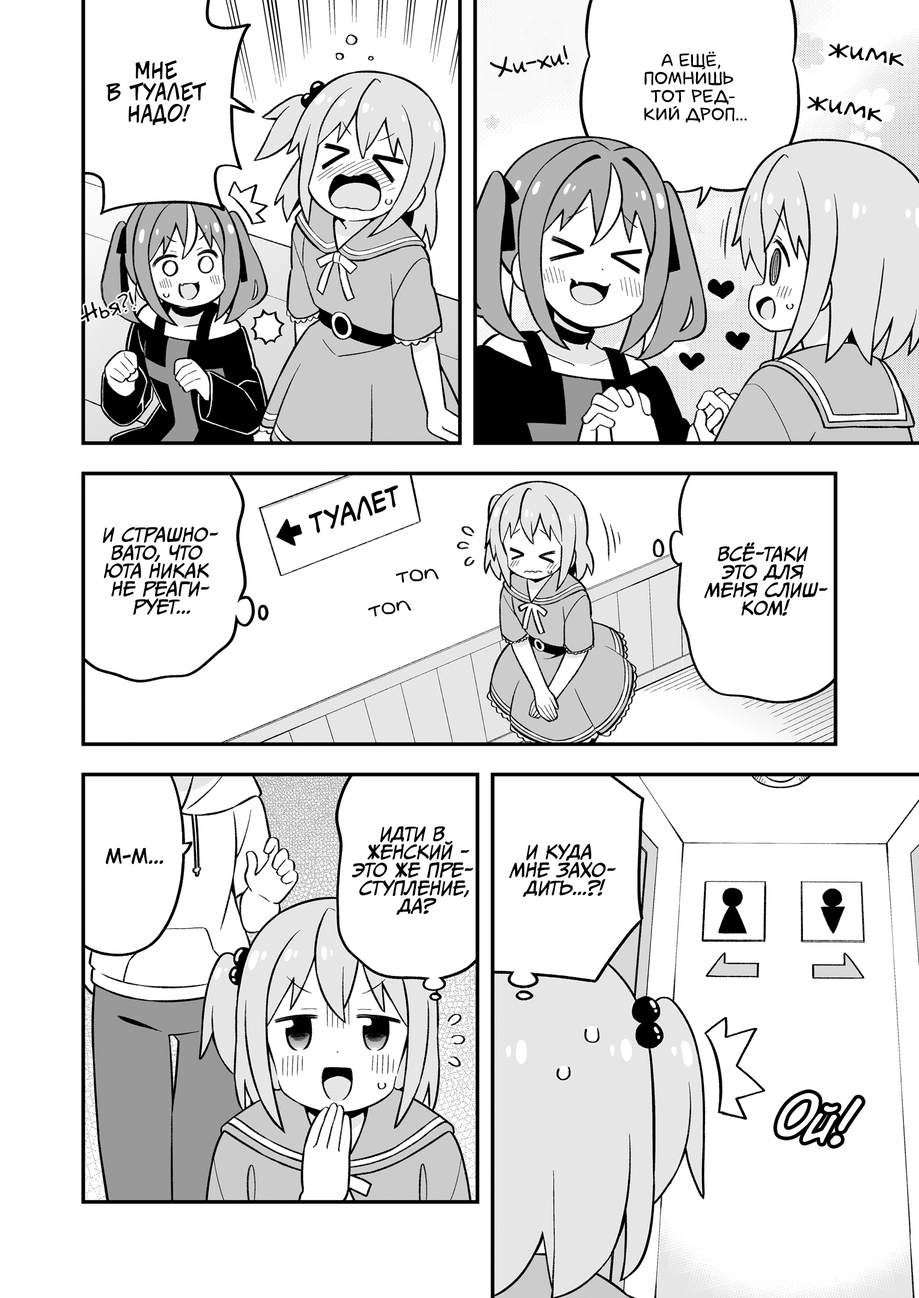
<style>
.page{position:relative;width:919px;height:1298px;background:#ffffff}
.page>*{position:absolute;margin:0}
.t1{font:25.2px "v_Augie";color:#000000}
.t2{font:18px "laCartoonerie";color:#000000;text-transform:uppercase}
.t3{font:28.8px "v_Augie";color:#000000}
.t4{font:21.6px "v_CCJeffCampbell";color:#000000;text-transform:uppercase}
.t5{font:23.4px "v_Augie";color:#000000}
.t6{font:27px "v_CCMonologous";color:#000000;text-transform:uppercase;scale:0.97 1}
.t7{font:18px "CCMeanwhile";color:#000000;text-transform:uppercase;font-style:italic}
.t8{font:21.6px "v_Augie";color:#000000}
.t9{font:19.8px "KuraiVoice2";color:#000000;text-transform:uppercase}
.t10{font:57.7px "v_CCDearDiary";color:#ffffff}
</style>
<div class="page">
<p class="t1" style="left:490px;top:45px;width:79px;height:33px;rotate:-11deg">Хи-хи!</p>
<p class="t2" style="left:644px;top:51px;width:103px;height:72px;text-align:center">А ещё,<br>помнишь<br>тот ред-<br>кий дроп...</p>
<p class="t3" style="left:828px;top:43px;width:76px;height:23px;rotate:6deg">жимк</p>
<p class="t4" style="left:106px;top:60px;width:100px;height:66px;text-align:center">Мне<br>в туалет<br>надо!</p>
<p class="t3" style="left:807px;top:96px;width:75px;height:26px;rotate:9deg">жимк</p>
<p class="t5" style="left:81px;top:291px;width:55px;height:31px;rotate:-15deg">Нья?!</p>
<p class="t6" style="left:308px;top:485px;width:90px;height:48px;rotate:-19deg">Туалет</p>
<p class="t7" style="left:103px;top:526px;width:115px;height:89px;text-align:center">И страшно-<br>вато, что<br>Юта никак<br>не реаги-<br>рует...</p>
<p class="t7" style="left:704px;top:542px;width:123px;height:75px;text-align:center">Всё-таки<br>это для<br>меня слиш-<br>ком!</p>
<p class="t8" style="left:395px;top:568px;width:44px;height:15px;rotate:-5deg">топ</p>
<p class="t8" style="left:368px;top:600px;width:43px;height:17px;rotate:-9deg">топ</p>
<p class="t7" style="left:352px;top:826px;width:121px;height:89px;text-align:center">Идти в<br>женский -<br>это же пре-<br>ступление,<br>да?</p>
<p class="t7" style="left:509px;top:843px;width:107px;height:54px;text-align:center">И куда<br>мне захо-<br>дить...?!</p>
<p class="t9" style="left:106px;top:848px;width:57px;height:16px">М-м...</p>
<p class="t10" style="left:776px;top:1093px;width:86px;height:52px;rotate:10deg">Ой!</p>
</div>
